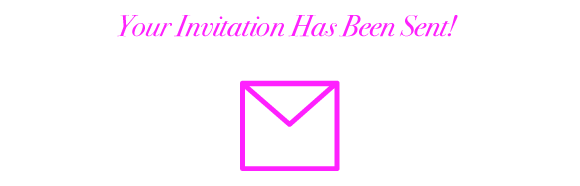
<style>
.page{position:relative;width:580px;height:186px;background:#ffffff}
.page>*{position:absolute;margin:0}
.t1{font:30px "BodoniSvtyTwoOSITCTTBookIt";letter-spacing:-0.01em;color:#fe22fd}
</style>
<div class="page">
<p class="t1" style="left:117px;top:15px;width:341px;height:22px">Your Invitation Has Been Sent!</p>
</div>
